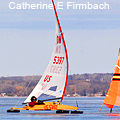
<style>
.page{position:relative;width:120px;height:120px}
.page>*{position:absolute;margin:0}
.t1{font:10.4px "ArialMT";color:#ffffff}
</style>
<div class="page">
<p class="t1" style="left:8px;top:2px;width:101px;height:7px">Catherine E Firmbach</p>
</div>
